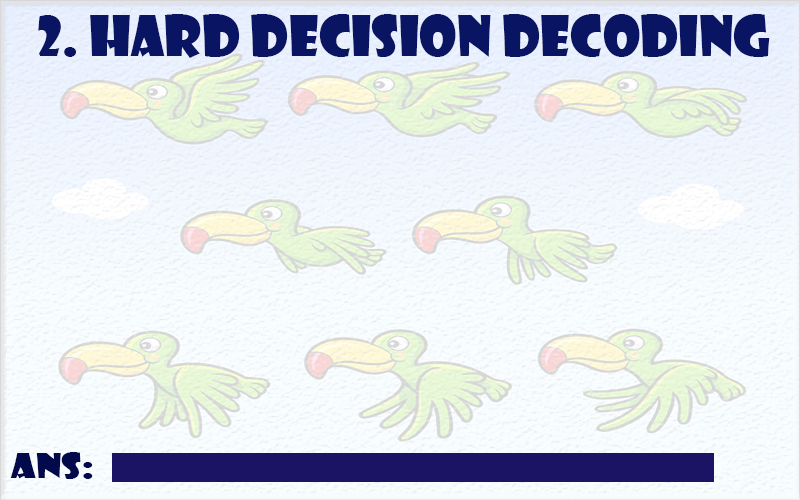
<style>
.page{position:relative;width:800px;height:500px}
.page>*{position:absolute;margin:0}
.t1{font:54.2px "ShowcardGothic-Reg";color:#091562}
.t2{font:33.4px "ShowcardGothic-Reg";color:#020a4b;scale:1.2 1}
</style>
<div class="page">
<p class="t1" style="left:38px;top:14px;width:732px;height:44px">2. HARD DECISION DECODING</p>
<p class="t2" style="left:10px;top:452px;width:83px;height:27px">ans:</p>
</div>
